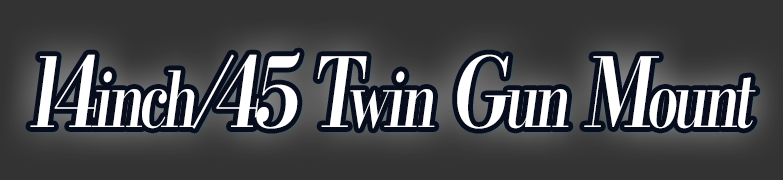
<style>
.page{position:relative;width:783px;height:180px;background:#333333}
.page>*{position:absolute;margin:0}
.t1{font:96px "KochoStd-Heavy";letter-spacing:-0.08em;color:#ffffff;font-style:italic;scale:0.75 1}
.t2{font:76.8px "KochoStd-Heavy";letter-spacing:-0.08em;color:#ffffff;font-style:italic;scale:0.75 1}
</style>
<div class="page">
<p class="t1" style="left:30px;top:52px;width:726px;height:77px">14<span class="t2">inch</span>/45 T<span class="t2">win</span> G<span class="t2">un</span> M<span class="t2">ount</span></p>
</div>
